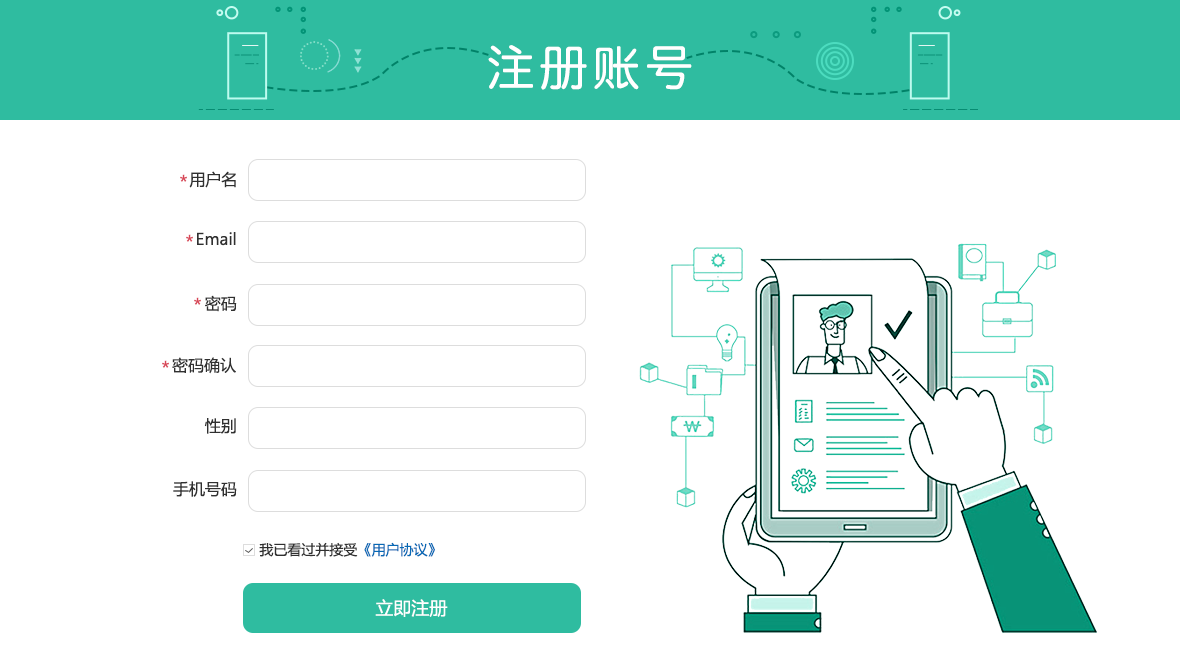
<style>
.page{position:relative;width:1180px;height:672px;background:#ffffff}
.page>*{position:absolute;margin:0}
.t1{font:48px "QingYuanMono";letter-spacing:0.1em;color:#ffffff}
.t2{font:18px "MicrosoftYaHei";color:#d84556}
.t3{font:16px "MicrosoftYaHei";color:#303030}
.t4{font:14px "MicrosoftYaHei";color:#303030}
.t5{font:14px "MicrosoftYaHei";color:#0669b5}
.t6{font:18px "MicrosoftYaHei";color:#ffffff}
</style>
<div class="page">
<p class="t1" style="left:488px;top:45px;width:204px;height:45px">注册账号</p>
<p class="t2" style="left:180px;top:174px;width:7px;height:8px">*</p>
<p class="t3" style="left:189px;top:171px;width:47px;height:17px">用户名</p>
<p class="t3" style="left:197px;top:232px;width:39px;height:14px">Email</p>
<p class="t2" style="left:186px;top:234px;width:7px;height:8px">*</p>
<p class="t2" style="left:194px;top:297px;width:7px;height:8px">*</p>
<p class="t3" style="left:205px;top:295px;width:32px;height:17px">密码</p>
<p class="t2" style="left:162px;top:360px;width:7px;height:8px">*</p>
<p class="t3" style="left:172px;top:357px;width:64px;height:17px">密码确认</p>
<p class="t3" style="left:204px;top:418px;width:32px;height:16px">性别</p>
<p class="t3" style="left:173px;top:481px;width:64px;height:16px">手机号码</p>
<p class="t4" style="left:259px;top:542px;width:99px;height:15px">我已看过并接受</p>
<p class="t5" style="left:364px;top:542px;width:71px;height:15px">《用户协议》</p>
<p class="t6" style="left:375px;top:599px;width:73px;height:18px">立即注册</p>
</div>
